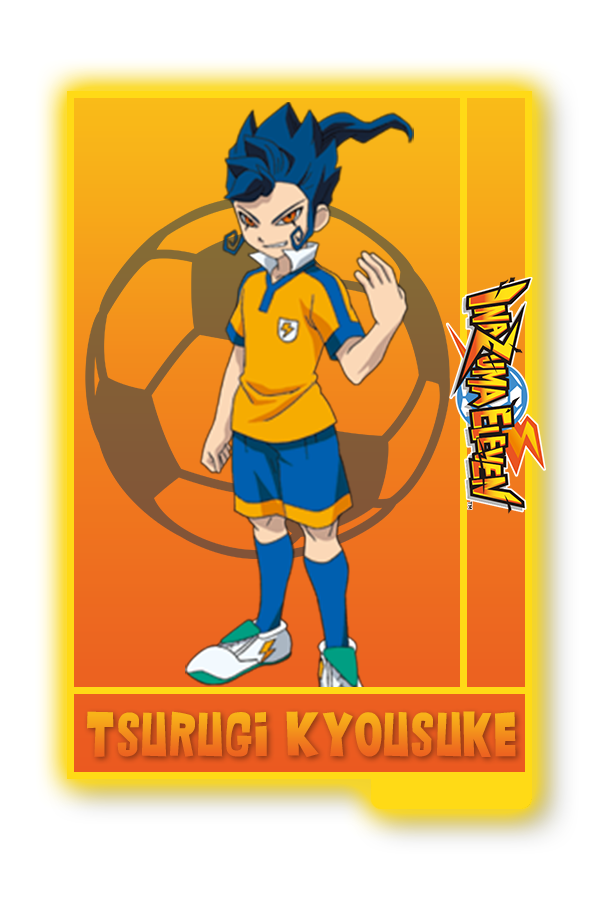
<style>
.page{position:relative;width:600px;height:900px;background:#ffffff}
.page>*{position:absolute;margin:0}
.t1{font:65.2px "TTG-Bold"}
</style>
<div class="page">
<p class="t1" style="left:87px;top:711px;width:429px;height:47px">Tsurugi Kyousuke</p>
</div>
